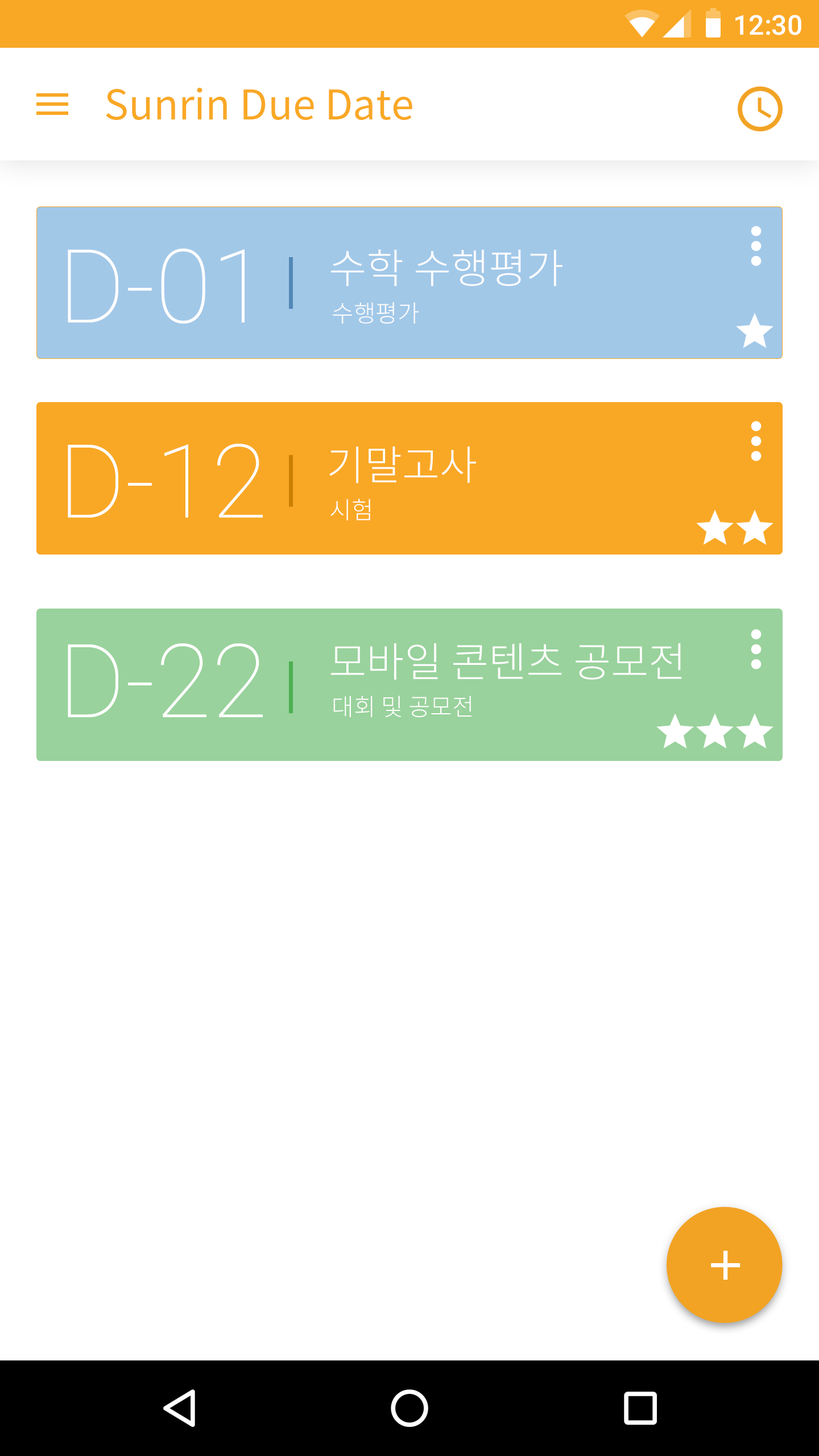
<style>
.page{position:relative;width:819px;height:1456px;background:#ffffff}
.page>*{position:absolute;margin:0}
.t1{font:27.3px "Roboto-Medium";color:#ffffff}
.t2{font:40.9px "NotoSansCJKkr-Regular";color:#f9a825}
.t3{font:102.4px "Roboto-Thin";color:#fffefe}
.t4{font:40.9px "NotoSansCJKkr-Light";color:#fffefe}
.t5{font:23.9px "NotoSansCJKkr-Light";color:#fffefe}
</style>
<div class="page">
<p class="t1" style="left:735px;top:15px;width:66px;height:20px">12:30</p>
<p class="t2" style="left:106px;top:88px;width:306px;height:32px">Sunrin Due Date</p>
<p class="t3" style="left:68px;top:249px;width:177px;height:75px">D-01</p>
<p class="t4" style="left:331px;top:249px;width:231px;height:37px">수학 수행평가</p>
<p class="t5" style="left:333px;top:302px;width:86px;height:22px">수행평가</p>
<p class="t3" style="left:68px;top:444px;width:195px;height:74px">D-12</p>
<p class="t4" style="left:329px;top:446px;width:147px;height:37px">기말고사</p>
<p class="t5" style="left:330px;top:499px;width:40px;height:21px">시험</p>
<p class="t3" style="left:68px;top:643px;width:195px;height:74px">D-22</p>
<p class="t4" style="left:331px;top:643px;width:351px;height:37px">모바일 콘텐츠 공모전</p>
<p class="t5" style="left:333px;top:696px;width:138px;height:21px">대회 및 공모전</p>
</div>
